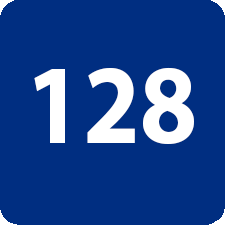
<style>
.page{position:relative;width:225px;height:225px;background:#002e81}
.page>*{position:absolute;margin:0}
.t1{font:114.3px "MyriadPro-Bold";color:#ffffff;scale:0.9 1}
</style>
<div class="page">
<p class="t1" style="left:34px;top:67px;width:160px;height:77px">128</p>
</div>
